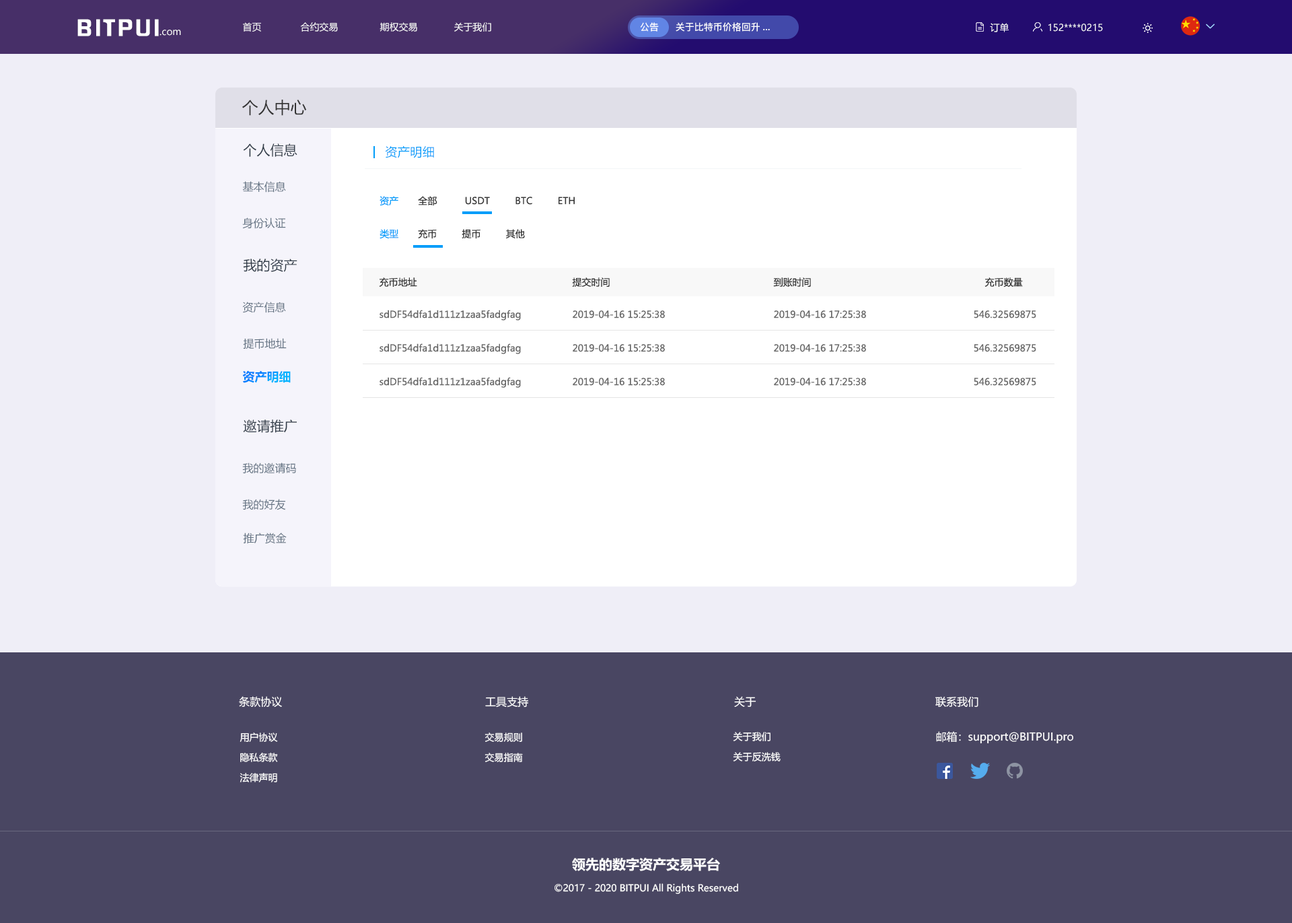
<style>
.page{position:relative;width:1292px;height:923px;background:#efeef7}
.page>*{position:absolute;margin:0}
.t1{font:20.6px "FZHZGBJW--GB1-0";letter-spacing:0.1em;color:#ffffff;scale:1.14 1}
.t2{font:9.4px "MicrosoftYaHei";color:#ffffff}
.t3{font:9.4px "PingFang-SC-Bold";color:#ffffff}
.t4{font:16.2px "MicrosoftYaHei";color:#333333}
.t5{font:13.5px "MicrosoftYaHei";color:#303b47}
.t6{font:12.1px "MicrosoftYaHei";letter-spacing:0.03em;color:#009dfa}
.t7{font:10.8px "MicrosoftYaHei";color:#637282}
.t8{font:9.4px "MicrosoftYaHei";color:#009dfa}
.t9{font:9.4px "MicrosoftYaHei";color:#333333}
.t10{font:9.4px "MicrosoftYaHei";color:#666666}
.t11{font:12.1px "MicrosoftYaHei-Bold"}
.t12{font:10.8px "MicrosoftYaHei";color:#ffffff}
.t13{font:9.4px/20.2px "MicrosoftYaHei";color:#ffffff}
.t14{font:13.5px "MicrosoftYaHei-Bold";color:#ffffff}
</style>
<div class="page">
<p class="t1" style="left:77px;top:19px;width:82px;height:17px">BITPUI</p>
<p class="t2" style="left:160px;top:30px;width:21px;height:6px">.com</p>
<p class="t2" style="left:243px;top:22px;width:248px;height:10px">首页              合约交易               期权交易             关于我们</p>
<p class="t3" style="left:640px;top:22px;width:19px;height:10px">公告</p>
<p class="t3" style="left:676px;top:22px;width:94px;height:10px">关于比特币价格回升...</p>
<p class="t2" style="left:990px;top:23px;width:19px;height:9px">订单</p>
<p class="t2" style="left:1049px;top:24px;width:54px;height:8px">152****0215</p>
<p class="t4" style="left:242px;top:100px;width:65px;height:16px">个人中心</p>
<p class="t5" style="left:243px;top:143px;width:54px;height:14px">个人信息</p>
<p class="t6" style="left:385px;top:145px;width:49px;height:13px">资产明细</p>
<p class="t7" style="left:242px;top:181px;width:44px;height:11px">基本信息</p>
<p class="t8" style="left:380px;top:196px;width:18px;height:10px">资产</p>
<p class="t9" style="left:418px;top:196px;width:157px;height:10px">全部          USDT         BTC         ETH</p>
<p class="t7" style="left:242px;top:217px;width:44px;height:12px">身份认证</p>
<p class="t8" style="left:380px;top:229px;width:18px;height:10px">类型</p>
<p class="t9" style="left:418px;top:229px;width:107px;height:10px">充币         提币         其他</p>
<p class="t5" style="left:243px;top:258px;width:54px;height:14px">我的资产</p>
<p class="t9" style="left:379px;top:277px;width:38px;height:10px">充币地址</p>
<p class="t9" style="left:572px;top:277px;width:38px;height:10px">提交时间</p>
<p class="t9" style="left:773px;top:277px;width:38px;height:10px">到账时间</p>
<p class="t9" style="left:985px;top:277px;width:38px;height:10px">充币数量</p>
<p class="t7" style="left:242px;top:302px;width:44px;height:11px">资产信息</p>
<p class="t10" style="left:380px;top:310px;width:141px;height:10px">sdDF54dfa1d111z1zaa5fadgfag</p>
<p class="t10" style="left:573px;top:310px;width:92px;height:8px">2019-04-16 15:25:38</p>
<p class="t10" style="left:774px;top:310px;width:92px;height:8px">2019-04-16 17:25:38</p>
<p class="t10" style="left:974px;top:310px;width:62px;height:8px">546.32569875</p>
<p class="t7" style="left:243px;top:338px;width:44px;height:11px">提币地址</p>
<p class="t10" style="left:380px;top:343px;width:141px;height:11px">sdDF54dfa1d111z1zaa5fadgfag</p>
<p class="t10" style="left:573px;top:344px;width:92px;height:8px">2019-04-16 15:25:38</p>
<p class="t10" style="left:774px;top:344px;width:92px;height:8px">2019-04-16 17:25:38</p>
<p class="t10" style="left:974px;top:344px;width:62px;height:8px">546.32569875</p>
<p class="t11" style="left:242px;top:371px;width:49px;height:12px">资产明细</p>
<p class="t10" style="left:380px;top:377px;width:141px;height:11px">sdDF54dfa1d111z1zaa5fadgfag</p>
<p class="t10" style="left:573px;top:378px;width:92px;height:8px">2019-04-16 15:25:38</p>
<p class="t10" style="left:774px;top:378px;width:92px;height:8px">2019-04-16 17:25:38</p>
<p class="t10" style="left:974px;top:378px;width:62px;height:8px">546.32569875</p>
<p class="t5" style="left:243px;top:419px;width:54px;height:14px">邀请推广</p>
<p class="t7" style="left:242px;top:462px;width:54px;height:11px">我的邀请码</p>
<p class="t7" style="left:242px;top:499px;width:44px;height:11px">我的好友</p>
<p class="t7" style="left:243px;top:532px;width:44px;height:12px">推广赏金</p>
<p class="t12" style="left:239px;top:696px;width:43px;height:11px">条款协议</p>
<p class="t12" style="left:485px;top:696px;width:43px;height:11px">工具支持</p>
<p class="t12" style="left:734px;top:696px;width:23px;height:11px">关于</p>
<p class="t12" style="left:936px;top:696px;width:43px;height:11px">联系我们</p>
<p class="t13" style="left:240px;top:732px;width:38px;height:50px;text-align:center">用户协议<br>隐私条款<br>法律声明</p>
<p class="t13" style="left:485px;top:732px;width:38px;height:30px">交易规则<br>交易指南</p>
<p class="t13" style="left:733px;top:732px;width:48px;height:29px">关于我们<br>关于反洗钱</p>
<p class="t12" style="left:936px;top:731px;width:138px;height:13px">邮箱：support@BITPUI.pro</p>
<p class="t14" style="left:572px;top:857px;width:148px;height:14px">领先的数字资产交易平台</p>
<p class="t2" style="left:555px;top:883px;width:183px;height:11px">©2017 - 2020 BITPUI All Rights Reserved</p>
</div>
